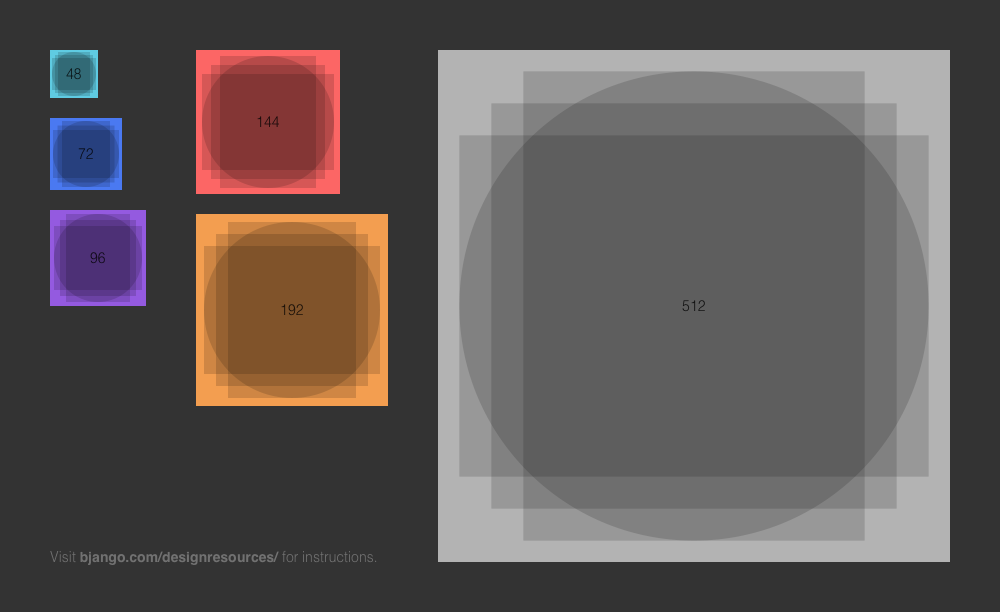
<style>
.page{position:relative;width:1000px;height:612px;background:#333333}
.page>*{position:absolute;margin:0}
.t1{font:14px "Helvetica-Light";color:#0a1518}
.t2{font:12px "MyriadPro-Regular";color:#1a0b0b}
.t3{font:14px "Helvetica-Light"}
.t4{font:14px "Helvetica-Light";color:#0f0a18}
.t5{font:12px "MyriadPro-Regular";color:#1a1108}
.t6{font:12px "MyriadPro-Regular";color:#000000}
.t7{font:14px "Helvetica-Bold";color:#808080}
.t8{font:14px "Helvetica-Light";color:#808080}
</style>
<div class="page">
<p class="t1" style="left:66px;top:68px;width:15px;height:12px">48</p>
<p class="t2" style="left:257px;top:116px;width:22px;height:11px">144</p>
<p class="t3" style="left:78px;top:148px;width:15px;height:11px">72</p>
<p class="t4" style="left:90px;top:252px;width:15px;height:12px">96</p>
<p class="t5" style="left:281px;top:304px;width:22px;height:12px">192</p>
<p class="t6" style="left:682px;top:300px;width:23px;height:12px">512</p>
<p class="t7" style="left:50px;top:550px;width:327px;height:15px"><span class="t8">Visit </span>bjango.com/designresources/ <span class="t8">for instructions.</span></p>
</div>
